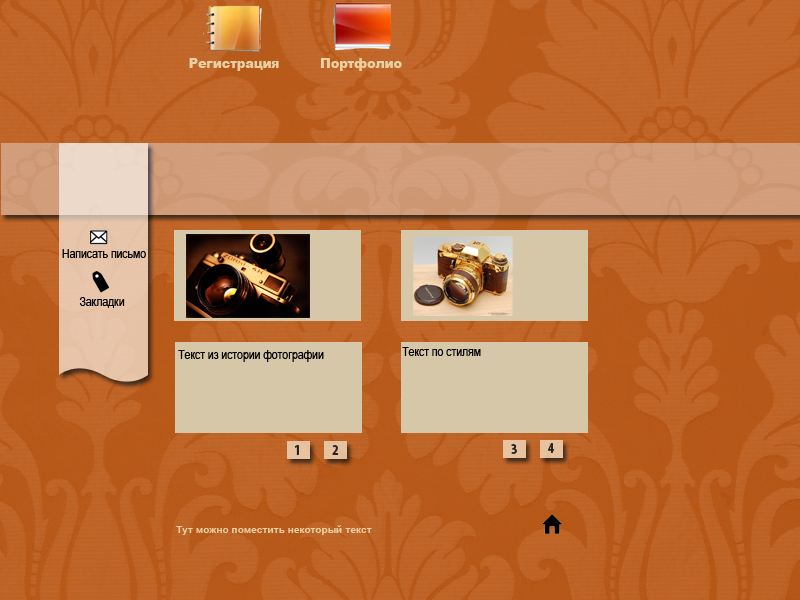
<style>
.page{position:relative;width:800px;height:600px}
.page>*{position:absolute;margin:0}
.t1{font:12.7px "Arial-Black";color:#e9d0a4}
.t2{font:12.7px "ArialNarrow";color:#000000}
.t3{font:15.2px "MyriadPro-BoldCond";color:#232526}
.t4{font:10.2px "Arial-BoldMT";color:#e9d0a4}
</style>
<div class="page">
<p class="t1" style="left:189px;top:58px;width:90px;height:13px">Регистрация</p>
<p class="t1" style="left:321px;top:58px;width:81px;height:13px">Портфолио</p>
<p class="t2" style="left:62px;top:249px;width:84px;height:9px">Написать письмо</p>
<p class="t2" style="left:79px;top:297px;width:46px;height:11px">Закладки</p>
<p class="t2" style="left:178px;top:350px;width:146px;height:12px">Текст из истории фотографии</p>
<p class="t2" style="left:402px;top:347px;width:79px;height:9px">Текст по стилям</p>
<p class="t3" style="left:294px;top:445px;width:5px;height:10px">1</p>
<p class="t3" style="left:332px;top:445px;width:7px;height:10px">2</p>
<p class="t3" style="left:511px;top:444px;width:6px;height:10px">3</p>
<p class="t3" style="left:548px;top:443px;width:6px;height:10px">4</p>
<p class="t4" style="left:176px;top:525px;width:196px;height:10px">Тут можно поместить некоторый текст</p>
</div>
